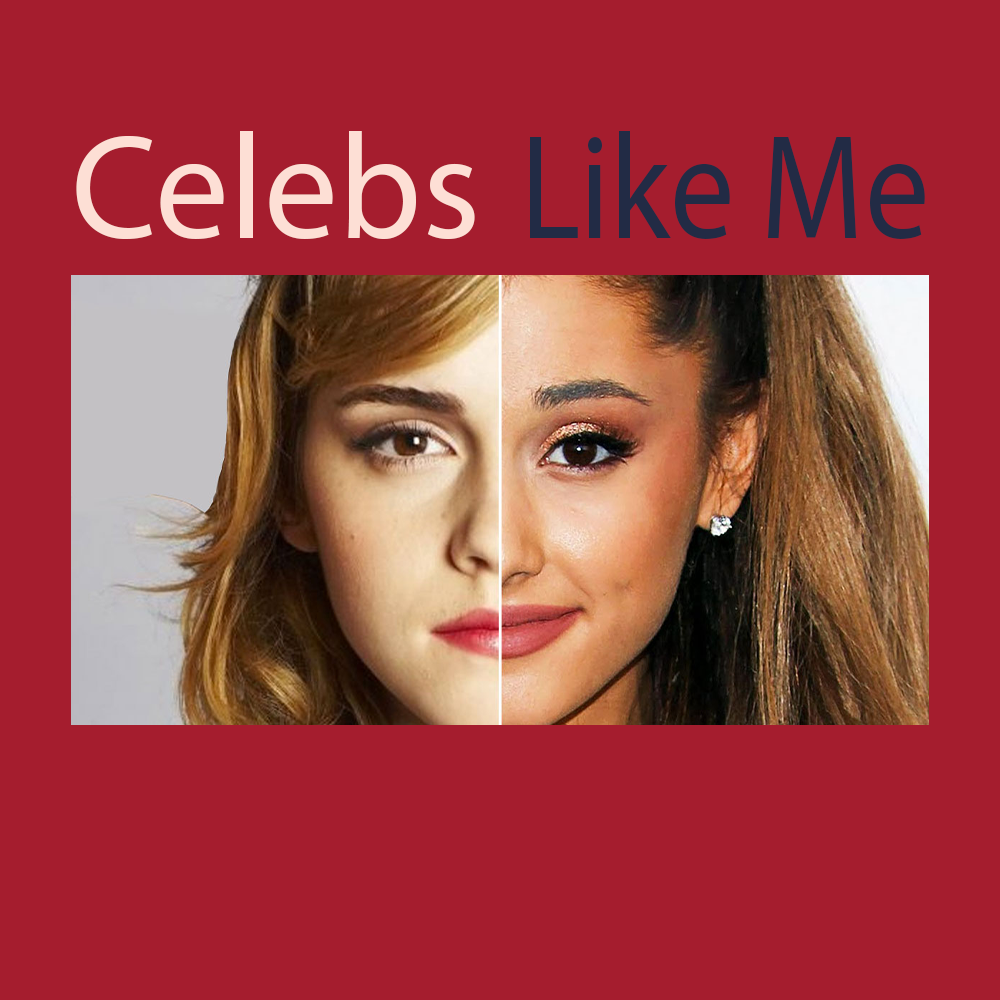
<style>
.page{position:relative;width:1000px;height:1000px;background:#a51d2e}
.page>*{position:absolute;margin:0}
.t1{font:150px "MyriadPro-Regular";color:#fddfd5}
.t2{font:150px "MyriadPro-Regular";color:#222b45;scale:0.85 1}
</style>
<div class="page">
<p class="t1" style="left:76px;top:131px;width:399px;height:108px">Celebs</p>
<p class="t2" style="left:530px;top:131px;width:395px;height:108px">Like Me</p>
</div>
